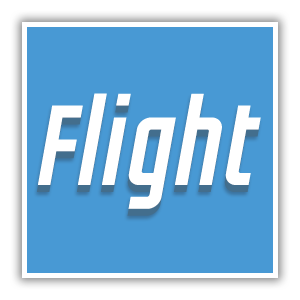
<style>
.page{position:relative;width:300px;height:300px;background:#4899d4}
.page>*{position:absolute;margin:0}
.t1{font:115px "GROTESKIA-OBLIQUE";color:#ffffff}
</style>
<div class="page">
<p class="t1" style="left:37px;top:100px;width:223px;height:116px">Flight</p>
<p class="t1" style="left:38px;top:93px;width:223px;height:116px">Flight</p>
</div>
